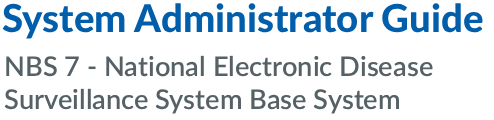
<style>
.page{position:relative;width:494px;height:120px;background:#ffffff}
.page>*{position:absolute;margin:0}
.t1{font:38.4px "Lato-Heavy";color:#005eaa}
.t2{font:27.3px "Lato-Semibold";color:#566165}
</style>
<div class="page">
<p class="t1" style="left:2px;top:3px;width:481px;height:36px">System Administrator Guide</p>
<p class="t2" style="left:4px;top:55px;width:429px;height:59px">NBS 7 - National Electronic Disease Surveillance System Base System</p>
</div>
